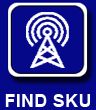
<style>
.page{position:relative;width:96px;height:110px;background:#050989}
.page>*{position:absolute;margin:0}
.t1{font:18.5px "Arial-BoldMT";color:#feffff}
</style>
<div class="page">
<p class="t1" style="left:5px;top:94px;width:85px;height:13px">FIND SKU</p>
</div>
